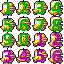
<style>
.page{position:relative;width:64px;height:64px;background:#ffffff}
.page>*{position:absolute;margin:0}
.t1{font:18.7px "Calibri-Bold";color:#04b100}
.t2{font:18.7px "Calibri-Bold";color:#b100ab}
.t3{font:18.7px "Calibri-Bold";color:#ad0fa0}
</style>
<div class="page">
<p class="t1" style="left:4px;top:2px;width:8px;height:12px">1</p>
<p class="t1" style="left:19px;top:2px;width:9px;height:12px">2</p>
<p class="t1" style="left:36px;top:2px;width:9px;height:12px">3</p>
<p class="t1" style="left:51px;top:2px;width:10px;height:12px">4</p>
<p class="t1" style="left:3px;top:19px;width:9px;height:12px">5</p>
<p class="t1" style="left:19px;top:19px;width:10px;height:12px">6</p>
<p class="t1" style="left:36px;top:19px;width:9px;height:12px">7</p>
<p class="t1" style="left:52px;top:19px;width:9px;height:12px">8</p>
<p class="t1" style="left:3px;top:33px;width:9px;height:12px">9</p>
<p class="t1" style="left:19px;top:33px;width:10px;height:12px">0</p>
<p class="t2" style="left:36px;top:33px;width:9px;height:12px">1</p>
<p class="t2" style="left:52px;top:33px;width:9px;height:12px">2</p>
<p class="t2" style="left:3px;top:50px;width:9px;height:12px">3</p>
<p class="t2" style="left:19px;top:50px;width:10px;height:12px">4</p>
<p class="t2" style="left:36px;top:50px;width:9px;height:12px">5</p>
<p class="t3" style="left:52px;top:50px;width:9px;height:12px">6</p>
</div>
